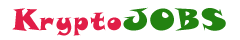
<style>
.page{position:relative;width:240px;height:40px;background:#ffffff}
.page>*{position:absolute;margin:0}
.t1{font:24px "SnapITC-Regular";letter-spacing:0.06em;color:#e11d47}
.t2{font:30px "SnapITC-Regular";letter-spacing:0.06em;color:#e11d47;text-transform:uppercase}
.t3{font:30px "SnapITC-Regular";letter-spacing:0.06em;color:#238211;text-transform:uppercase}
</style>
<div class="page">
<p class="t1" style="left:12px;top:7px;width:214px;height:29px"><span class="t2">K</span>rypto<span class="t3">Jobs</span></p>
</div>
